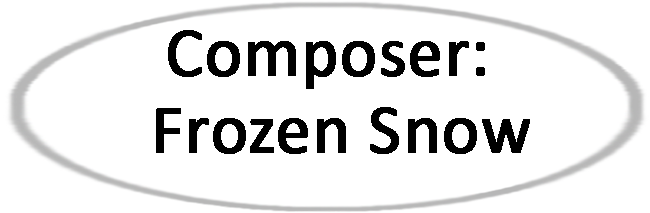
<style>
.page{position:relative;width:650px;height:213px;background:#ffffff}
.page>*{position:absolute;margin:0}
.t1{font:70px "Calibri";color:#000000;font-weight:bold}
</style>
<div class="page">
<p class="t1" style="left:168px;top:30px;width:317px;height:59px">Composer:</p>
<p class="t1" style="left:156px;top:107px;width:374px;height:47px">Frozen Snow</p>
</div>
